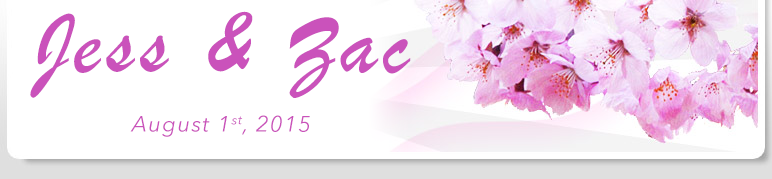
<style>
.page{position:relative;width:772px;height:179px;background:#ffffff}
.page>*{position:absolute;margin:0}
.t1{font:91px "BrushScriptMT";letter-spacing:0.06em;color:#ca52bb}
.t2{font:22px "AvenirNext-Italic";letter-spacing:0.06em;color:#ca52bb}
</style>
<div class="page">
<p class="t1" style="left:30px;top:11px;width:381px;height:87px">Jess &amp; Zac</p>
<p class="t2" style="left:130px;top:115px;width:180px;height:22px">August 1st, 2015</p>
</div>
